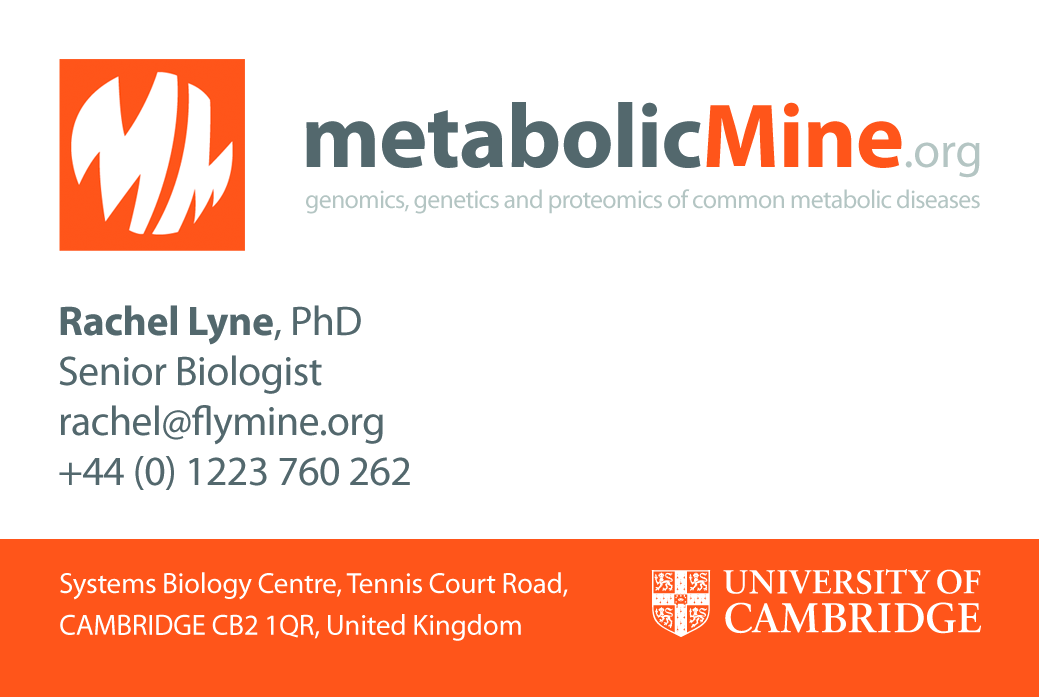
<style>
.page{position:relative;width:1039px;height:697px;background:#ffffff}
.page>*{position:absolute;margin:0}
.t1{font:91.7px "MyriadPro-Bold";letter-spacing:-0.01em;color:#53686d}
.t2{font:91.7px "MyriadPro-Bold";letter-spacing:-0.01em;color:#ff551a}
.t3{font:49.6px "MyriadPro-Regular";letter-spacing:-0.01em;color:#b3c5c3}
.t4{font:26px "MyriadPro-Regular";letter-spacing:-0.03em;color:#b3c5c3}
.t5{font:41.7px "MyriadPro-Regular";letter-spacing:-0.01em;color:#53686d}
.t6{font:41.7px "MyriadPro-Bold";letter-spacing:-0.01em;color:#53686d}
.t7{font:29.2px/41.7px "MyriadPro-Regular";letter-spacing:-0.01em;color:#ffffff}
</style>
<div class="page">
<p class="t1" style="left:306px;top:102px;width:674px;height:76px">metabolic<span class="t2">Mine</span><span class="t3">.org</span></p>
<p class="t4" style="left:306px;top:189px;width:674px;height:25px">genomics, genetics and proteomics of common metabolic diseases</p>
<p class="t5" style="left:59px;top:305px;width:351px;height:185px"><span class="t6">Rachel Lyne</span>, PhD<br>Senior Biologist<br>rachel@flymine.org<br>+44 (0) 1223 760 262</p>
<p class="t7" style="left:60px;top:572px;width:508px;height:69px">Systems Biology Centre, Tennis Court Road,<br>CAMBRIDGE CB2 1QR, United Kingdom</p>
</div>
